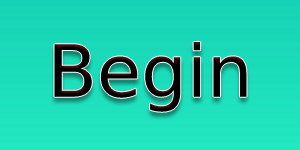
<style>
.page{position:relative;width:300px;height:150px}
.page>*{position:absolute;margin:0}
.t1{font:72px "DejaVuSans";color:#000000}
</style>
<div class="page">
<p class="t1" style="left:54px;top:42px;width:193px;height:70px">Begin</p>
</div>
